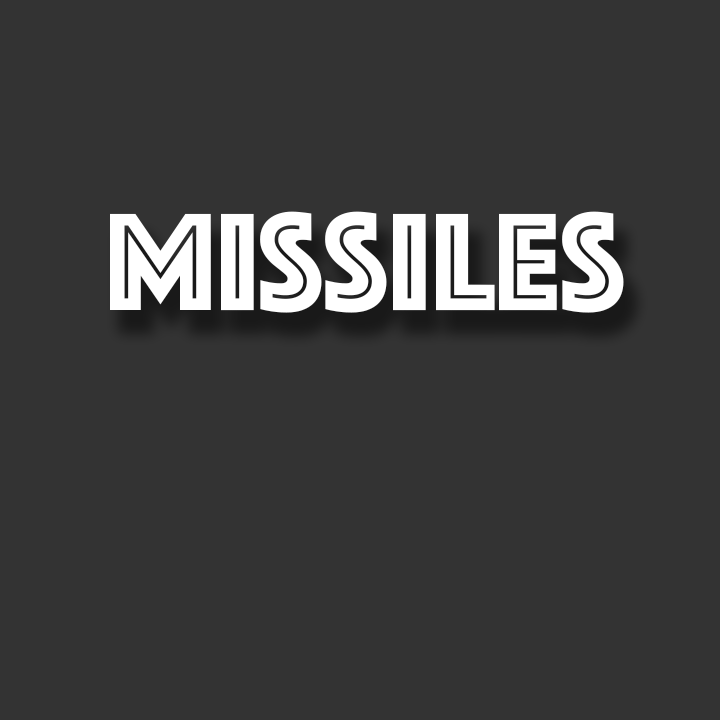
<style>
.page{position:relative;width:720px;height:720px;background:#333333}
.page>*{position:absolute;margin:0}
.t1{font:144px "Phosphate-Inline";color:#ffffff}
</style>
<div class="page">
<p class="t1" style="left:110px;top:211px;width:514px;height:102px">Missiles</p>
</div>
